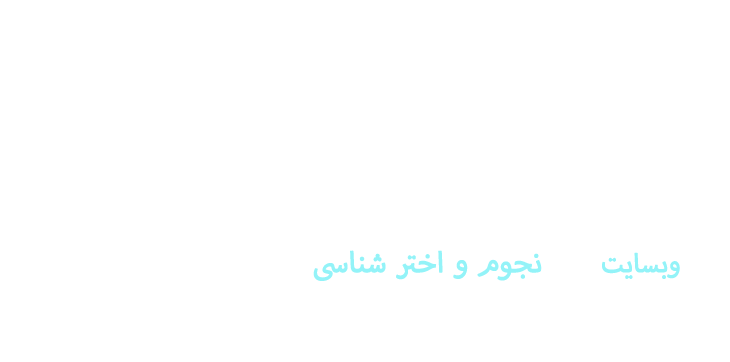
<style>
.page{position:relative;width:730px;height:362px;background:#ffffff}
.page>*{position:absolute;margin:0}
.t1{font:40px "MyriadArabic-Regular";color:#93f3f8;font-weight:bold}
</style>
<div class="page">
<p class="t1" style="left:313px;top:250px;width:229px;height:31px">نجوم و اختر شناسی</p>
</div>
